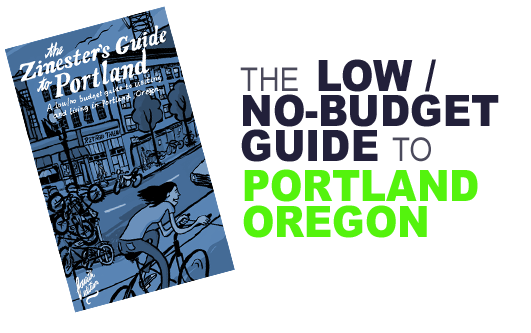
<style>
.page{position:relative;width:531px;height:333px;background:#ffffff}
.page>*{position:absolute;margin:0}
.t1{font:43.2px/35.2px "Arial-Black";color:#22203a;scale:0.9 1}
.t2{font:32.8px/35.2px "ArialMT";color:#4b4a5c;scale:0.9 1}
.t3{font:43.2px/35.2px "Arial-Black";color:#54f30d;scale:0.9 1}
</style>
<div class="page">
<p class="t1" style="left:240px;top:59px;width:259px;height:103px"><span class="t2">THE  </span>LOW /<br>NO-BUDGET<br>GUIDE <span class="t2">TO  <br></span></p>
<p class="t3" style="left:243px;top:169px;width:235px;height:69px">PORTLAND<br>OREGON</p>
</div>
